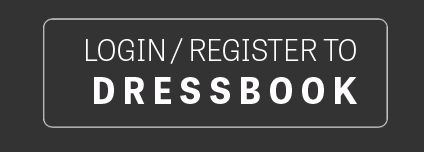
<style>
.page{position:relative;width:424px;height:152px;background:#333333}
.page>*{position:absolute;margin:0}
.t1{font:30px "TabletGothic-Thin";color:#fffdff}
.t2{font:36px "TabletGothic-Bold";color:#fffdff}
</style>
<div class="page">
<p class="t1" style="left:86px;top:38px;width:271px;height:66px;text-align:center">LOGIN / REGISTER TO <br><span class="t2">D R E S S B O O K</span></p>
</div>
